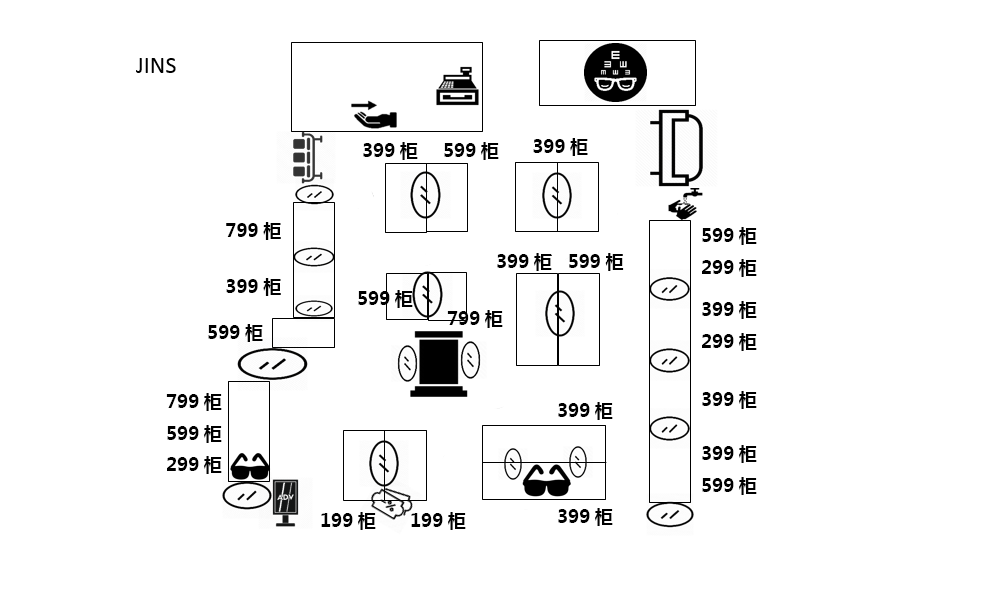
<style>
.page{position:relative;width:1000px;height:600px;background:#ffffff}
.page>*{position:absolute;margin:0}
.t1{font:18px "MicrosoftYaHei-Bold";color:#000000}
</style>
<div class="page">
<p class="t1" style="left:363px;top:142px;width:55px;height:18px">399柜</p>
<p class="t1" style="left:444px;top:142px;width:55px;height:18px">599柜</p>
<p class="t1" style="left:533px;top:138px;width:55px;height:18px">399柜</p>
<p class="t1" style="left:226px;top:222px;width:55px;height:18px">799柜</p>
<p class="t1" style="left:702px;top:227px;width:55px;height:50px">599柜<br>299柜</p>
<p class="t1" style="left:497px;top:253px;width:55px;height:18px">399柜</p>
<p class="t1" style="left:569px;top:253px;width:55px;height:18px">599柜</p>
<p class="t1" style="left:226px;top:278px;width:55px;height:18px">399柜</p>
<p class="t1" style="left:358px;top:290px;width:55px;height:18px">599柜</p>
<p class="t1" style="left:702px;top:301px;width:55px;height:50px">399柜<br>299柜</p>
<p class="t1" style="left:447px;top:310px;width:56px;height:18px">799柜</p>
<p class="t1" style="left:208px;top:324px;width:55px;height:18px">599柜</p>
<p class="t1" style="left:166px;top:393px;width:56px;height:81px">799柜<br>599柜<br>299柜</p>
<p class="t1" style="left:702px;top:391px;width:55px;height:18px">399柜</p>
<p class="t1" style="left:558px;top:402px;width:55px;height:18px">399柜</p>
<p class="t1" style="left:702px;top:445px;width:55px;height:50px">399柜<br>599柜</p>
<p class="t1" style="left:558px;top:508px;width:55px;height:18px">399柜</p>
<p class="t1" style="left:321px;top:512px;width:55px;height:18px">199柜</p>
<p class="t1" style="left:411px;top:512px;width:55px;height:18px">199柜</p>
</div>
